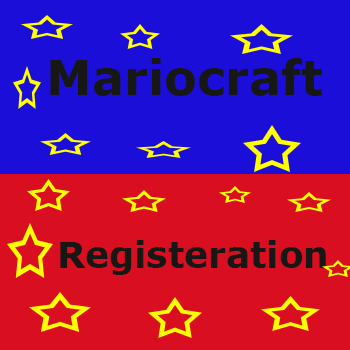
<style>
.page{position:relative;width:350px;height:350px;background:#1c0ed9}
.page>*{position:absolute;margin:0}
.t1{font:36px "Verdana-Bold";color:#171715}
.t2{font:48px "Verdana-Bold";color:#d9c30e}
.t3{font:48px "Verdana-Bold";color:#171715}
</style>
<div class="page">
<p class="t1" style="left:50px;top:58px;width:276px;height:217px;text-align:center"><span class="t2">    </span><span class="t3">Mariocraft<br><br><br>  </span>    Registeration</p>
</div>
